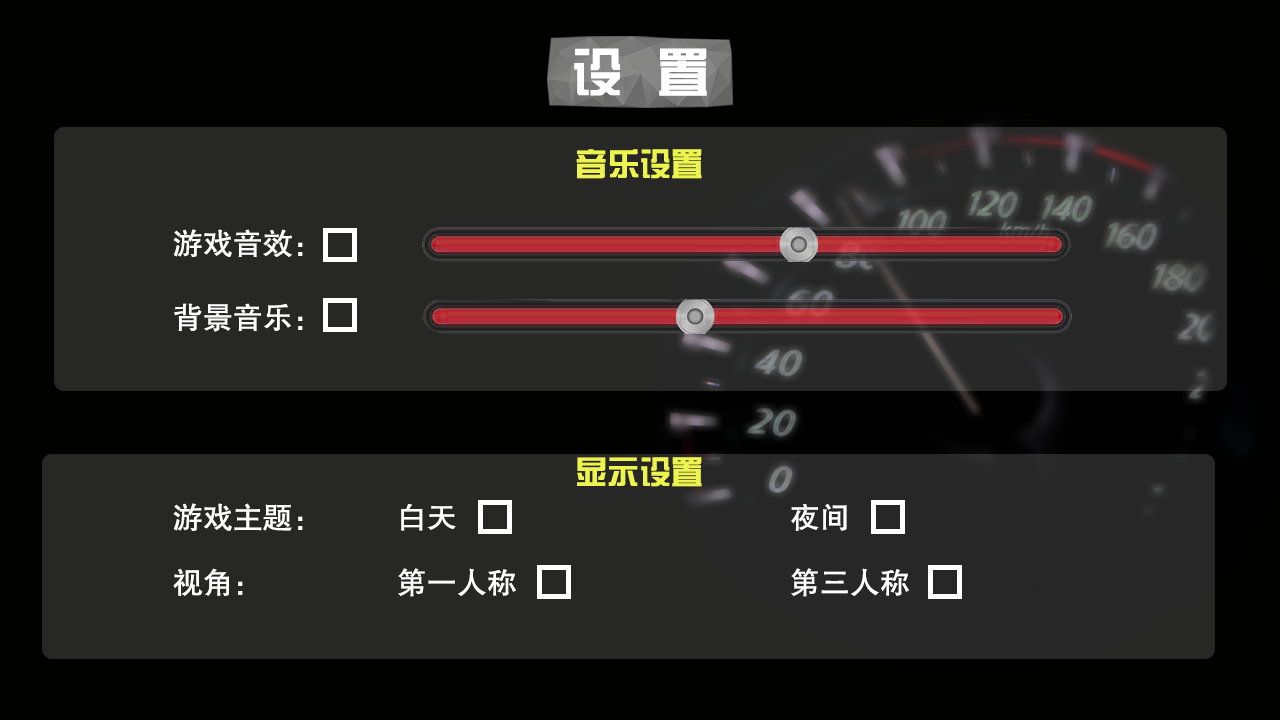
<style>
.page{position:relative;width:1280px;height:720px;background:#272726}
.page>*{position:absolute;margin:0}
.t1{font:52px "FZZYJW--GB1-0";color:#ffffff}
.t2{font:32px "FZZYJW--GB1-0";color:#eef44e}
.t3{font:30px "FZHTJW--GB1-0";color:#ffffff}
</style>
<div class="page">
<p class="t1" style="left:574px;top:48px;width:133px;height:48px">设  置</p>
<p class="t2" style="left:576px;top:149px;width:126px;height:30px">音乐设置</p>
<p class="t3" style="left:173px;top:229px;width:130px;height:28px">游戏音效：</p>
<p class="t3" style="left:174px;top:303px;width:129px;height:29px">背景音乐：</p>
<p class="t2" style="left:577px;top:457px;width:125px;height:30px">显示设置</p>
<p class="t3" style="left:173px;top:503px;width:130px;height:28px">游戏主题：</p>
<p class="t3" style="left:401px;top:504px;width:55px;height:27px">白天</p>
<p class="t3" style="left:791px;top:504px;width:56px;height:27px">夜间</p>
<p class="t3" style="left:173px;top:568px;width:70px;height:28px">视角：</p>
<p class="t3" style="left:398px;top:568px;width:118px;height:29px">第一人称</p>
<p class="t3" style="left:791px;top:568px;width:118px;height:29px">第三人称</p>
</div>
